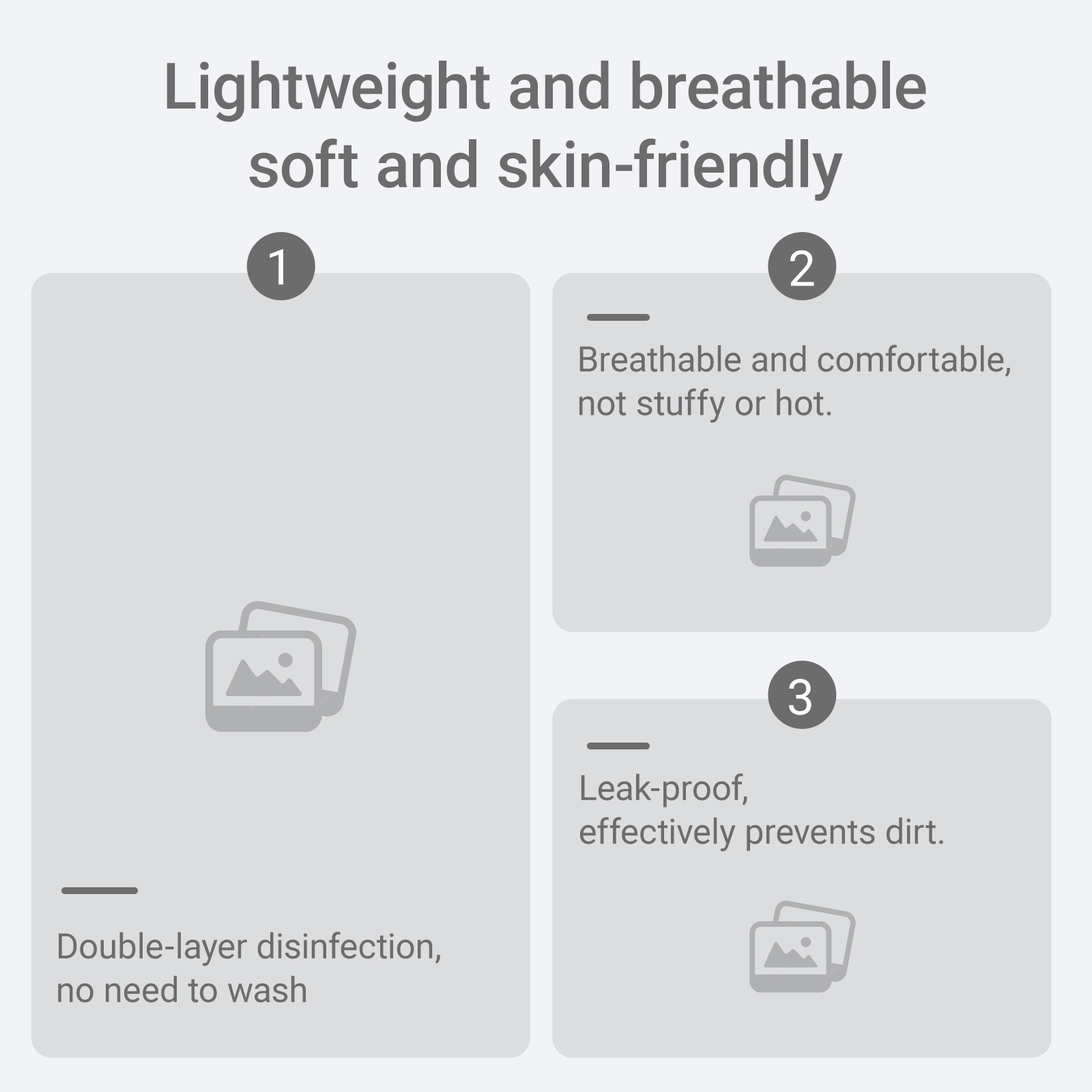
<style>
.page{position:relative;width:1092px;height:1092px;background:#dcdddf}
.page>*{position:absolute;margin:0}
.t1{font:64.1px/78.6px "Roboto-Medium";color:#6c6c6c}
.t2{font:49.1px "Roboto-Regular";color:#ffffff}
.t3{font:34.9px/43.7px "Roboto-Regular";color:#6c6c6c}
</style>
<div class="page">
<p class="t1" style="left:167px;top:60px;width:759px;height:141px;text-align:center">Lightweight and breathable<br>soft and skin-friendly</p>
<p class="t2" style="left:270px;top:249px;width:13px;height:36px">1</p>
<p class="t2" style="left:790px;top:250px;width:24px;height:36px">2</p>
<p class="t3" style="left:579px;top:345px;width:431px;height:78px">Breathable and comfortable, <br>not stuffy or hot.</p>
<p class="t2" style="left:789px;top:678px;width:22px;height:37px">3</p>
<p class="t3" style="left:580px;top:773px;width:363px;height:79px">Leak-proof, <br>effectively prevents dirt.</p>
<p class="t3" style="left:58px;top:932px;width:382px;height:71px">Double-layer disinfection, <br>no need to wash</p>
</div>
